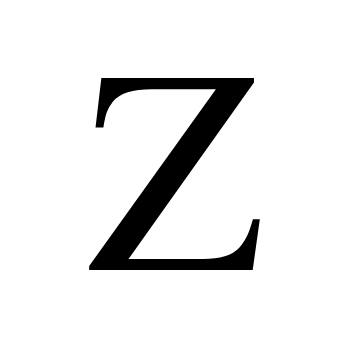
<style>
.page{position:relative;width:349px;height:349px;background:#ffffff}
.page>*{position:absolute;margin:0}
.t1{font:260px "Jomolhari";color:#000000}
</style>
<div class="page">
<p class="t1" style="left:89px;top:78px;width:171px;height:192px">Z</p>
</div>
